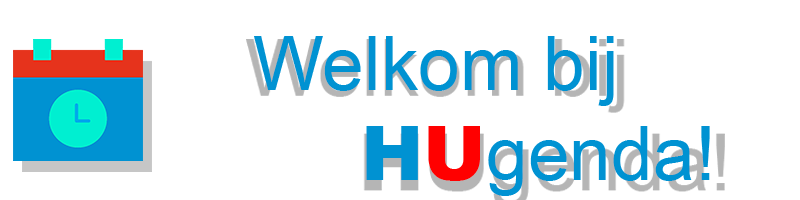
<style>
.page{position:relative;width:800px;height:200px;background:#ffffff}
.page>*{position:absolute;margin:0}
.t1{font:75px "ArialMT";color:#0092d2}
.t2{font:75px "Arial-Black";color:#0092d2}
.t3{font:75px "Arial-Black";color:#ff0000}
</style>
<div class="page">
<p class="t1" style="left:254px;top:36px;width:456px;height:160px">Welkom bij<br>   <span class="t2">H</span><span class="t3">U</span>genda!</p>
</div>
